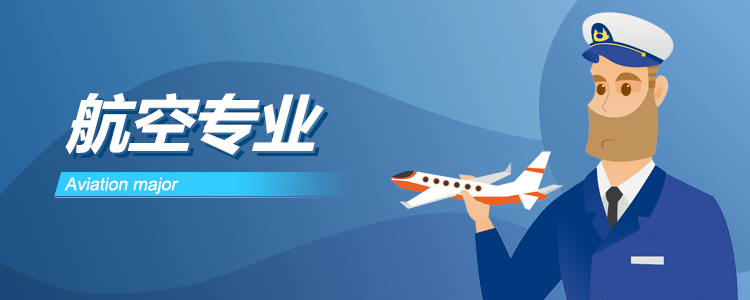
<style>
.page{position:relative;width:750px;height:300px}
.page>*{position:absolute;margin:0}
.t1{font:62.6px "MicrosoftYaHei-Bold";color:#ffffff;font-style:italic}
.t2{font:17.7px "ArialMT";color:#ffffff;font-style:italic}
</style>
<div class="page">
<p class="t1" style="left:65px;top:93px;width:259px;height:62px">航空专业</p>
<p class="t2" style="left:64px;top:177px;width:115px;height:17px">Aviation major</p>
</div>
